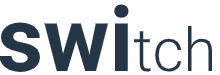
<style>
.page{position:relative;width:220px;height:75px;background:#ffffff}
.page>*{position:absolute;margin:0}
.t1{font:90px "Roboto-Bold";color:#253746}
.t2{font:60px "Roboto-Light";color:#253746}
</style>
<div class="page">
<p class="t1" style="left:0px;top:4px;width:212px;height:68px">swi<span class="t2">tch</span></p>
</div>
